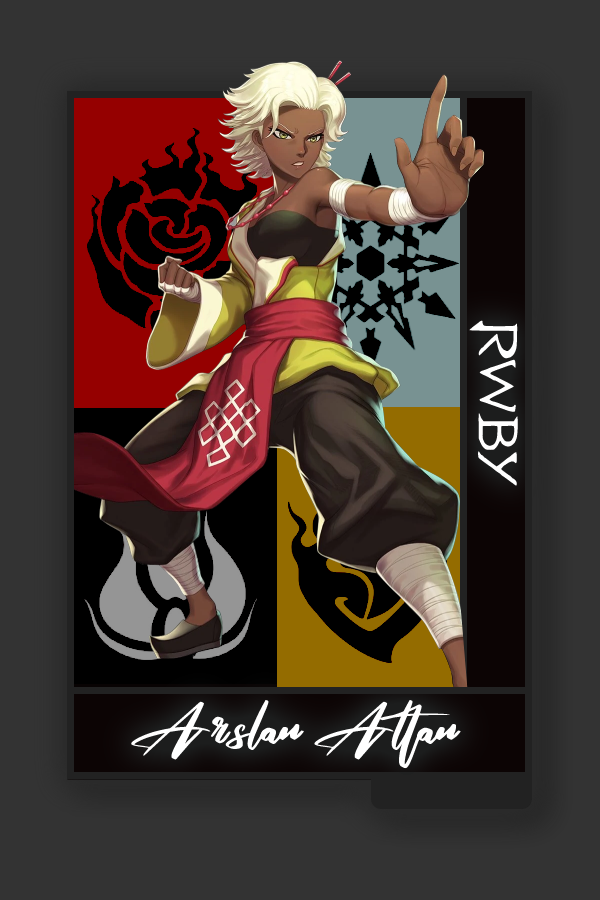
<style>
.page{position:relative;width:600px;height:900px;background:#333333}
.page>*{position:absolute;margin:0}
.t1{font:61.3px "RWBY_Style";color:#ffffff;scale:1.25 1}
.t2{font:75px "RosegaFREE";color:#ffffff}
</style>
<div class="page">
<p class="t1" style="left:469px;top:320px;width:49px;height:166px;rotate:90deg">RWBY</p>
<p class="t2" style="left:130px;top:699px;width:331px;height:70px">Arslan Altan</p>
</div>
